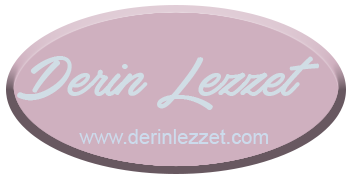
<style>
.page{position:relative;width:353px;height:178px;background:#cfb0bf}
.page>*{position:absolute;margin:0}
.t1{font:65.2px "HaydonBrushPERSONALUSE";color:#d0dde5}
.t2{font:20.2px "ArialMT";color:#ccdbec}
</style>
<div class="page">
<p class="t1" style="left:17px;top:56px;width:302px;height:54px">Derin Lezzet</p>
<p class="t2" style="left:79px;top:129px;width:189px;height:15px">www.derinlezzet.com</p>
</div>
